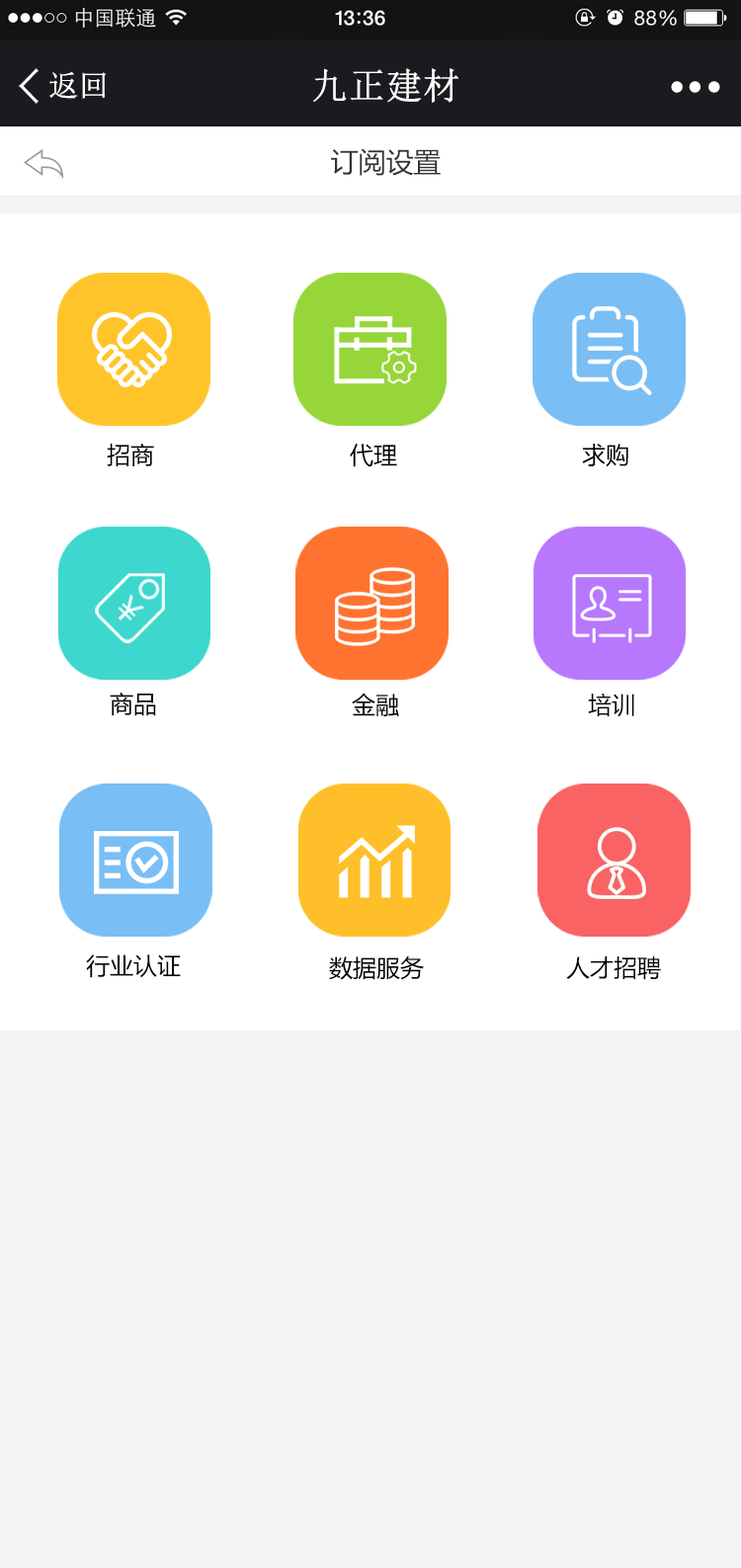
<style>
.page{position:relative;width:741px;height:1568px;background:#ffffff}
.page>*{position:absolute;margin:0}
.t1{font:29.6px "NSimSun";color:#ffffff;font-weight:bold}
.t2{font:36.2px "NSimSun";color:#ffffff;font-weight:bold}
.t3{font:27.7px "MicrosoftYaHei";color:#333333}
.t4{font:27.7px "MicrosoftYaHei";color:#333333;font-weight:bold}
.t5{font:23.7px "MicrosoftYaHei";color:#000000}
</style>
<div class="page">
<p class="t1" style="left:49px;top:71px;width:57px;height:28px">返回</p>
<p class="t2" style="left:313px;top:68px;width:145px;height:35px">九正建材</p>
<p class="t3" style="left:331px;top:148px;width:110px;height:28px"><span class="t4"><br></span>订阅设置</p>
<p class="t5" style="left:107px;top:443px;width:47px;height:23px">招商</p>
<p class="t5" style="left:350px;top:444px;width:47px;height:23px">代理</p>
<p class="t5" style="left:582px;top:444px;width:46px;height:23px">求购</p>
<p class="t5" style="left:110px;top:692px;width:46px;height:24px">商品</p>
<p class="t5" style="left:352px;top:694px;width:47px;height:22px">金融</p>
<p class="t5" style="left:588px;top:693px;width:46px;height:24px">培训</p>
<p class="t5" style="left:86px;top:954px;width:95px;height:24px">行业认证</p>
<p class="t5" style="left:329px;top:955px;width:95px;height:25px">数据服务</p>
<p class="t5" style="left:566px;top:956px;width:95px;height:24px">人才招聘</p>
</div>
